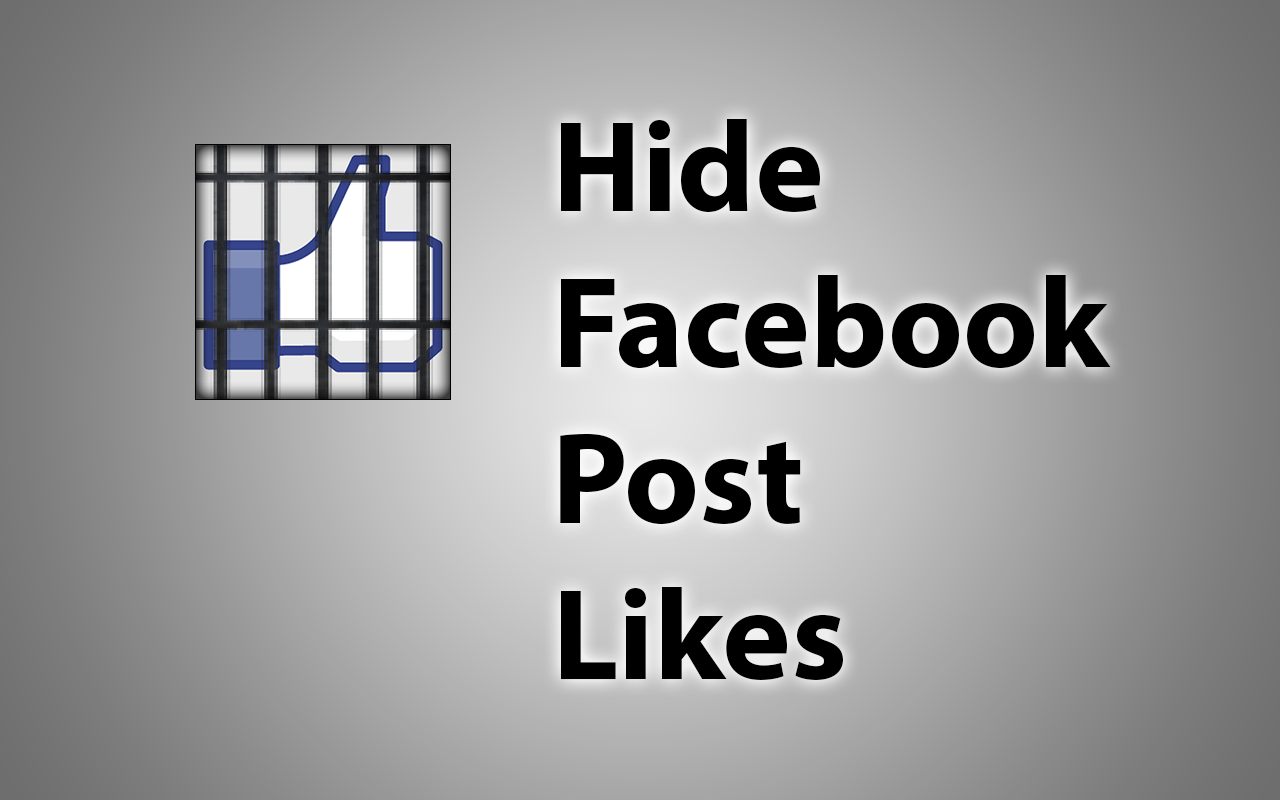
<style>
.page{position:relative;width:1280px;height:800px}
.page>*{position:absolute;margin:0}
.t1{font:130px "MyriadPro-Bold";color:#000000}
</style>
<div class="page">
<p class="t1" style="left:560px;top:119px;width:551px;height:561px">Hide<br>Facebook<br>Post<br>Likes</p>
</div>
